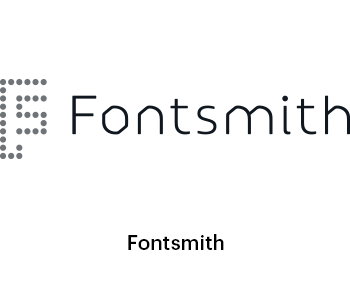
<style>
.page{position:relative;width:350px;height:300px;background:#ffffff}
.page>*{position:absolute;margin:0}
.t1{font:20.6px "Graphik-Medium";color:#000000}
</style>
<div class="page">
<p class="t1" style="left:128px;top:234px;width:96px;height:16px">Fontsmith</p>
</div>
